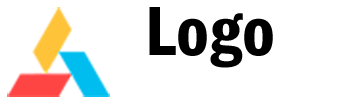
<style>
.page{position:relative;width:360px;height:106px;background:#ffffff}
.page>*{position:absolute;margin:0}
.t1{font:72px "FranklinGothic-DemiCond";color:#000000}
</style>
<div class="page">
<p class="t1" style="left:149px;top:7px;width:124px;height:61px">Logo</p>
</div>
